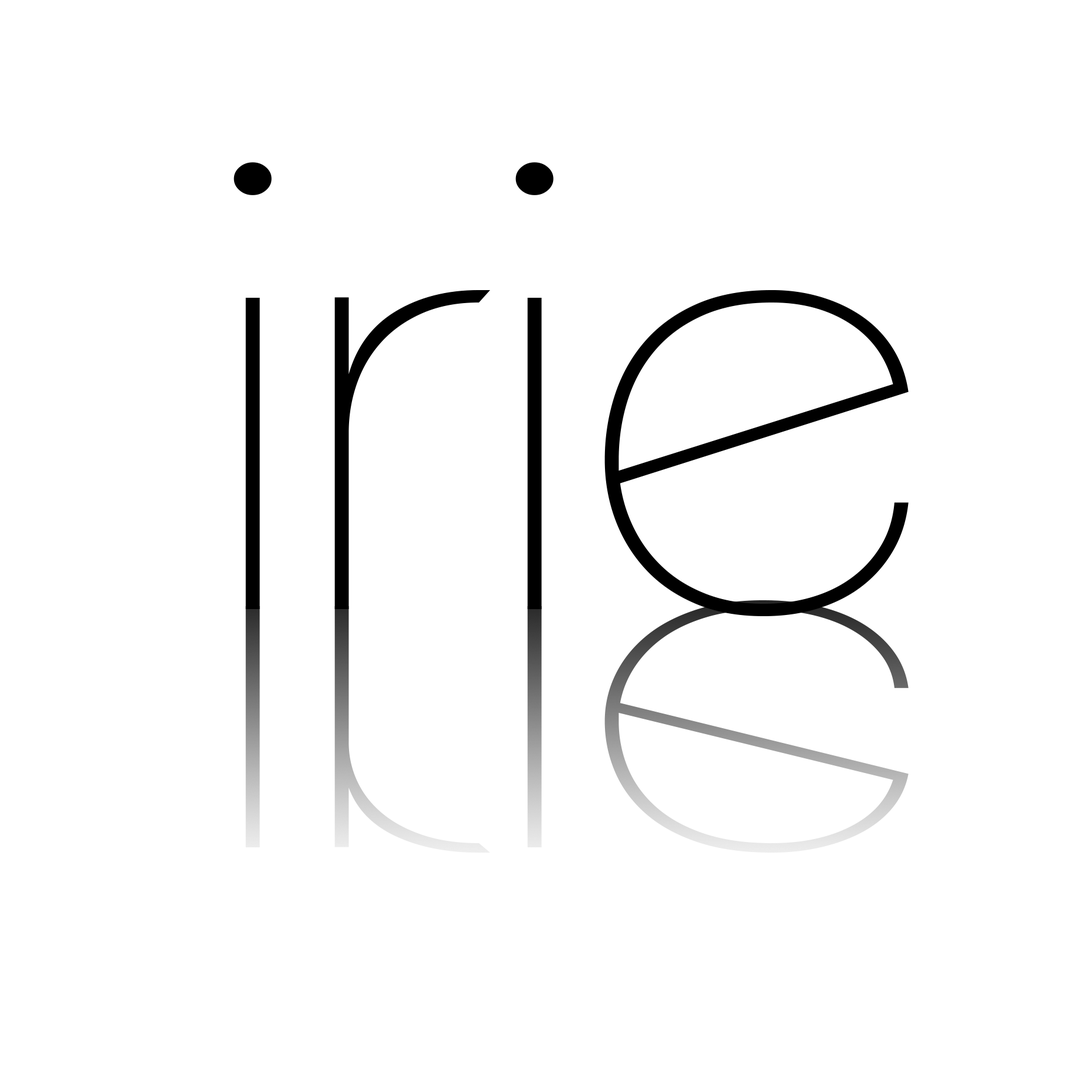
<style>
.page{position:relative;width:1092px;height:1092px;background:#ffffff}
.page>*{position:absolute;margin:0}
.t1{font:606.4px "ClementePDaa-Hairline";color:#000000;scale:1.15 1}
.t2{font:468.7px "ClementePDaa-Hairline";scale:1.49 1}
</style>
<div class="page">
<p class="t1" style="left:233px;top:162px;width:676px;height:454px">irie</p>
<p class="t2" style="left:233px;top:600px;width:676px;height:352px">irie</p>
</div>
